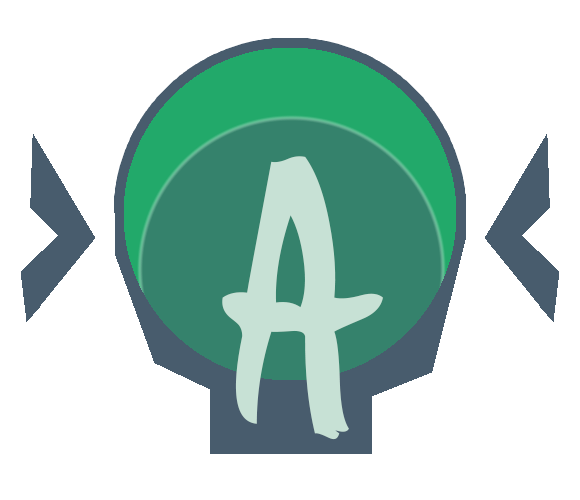
<style>
.page{position:relative;width:580px;height:500px;background:#ffffff}
.page>*{position:absolute;margin:0}
.t1{font:420px "BadHandwriting7.2";color:#c7e1d5}
</style>
<div class="page">
<p class="t1" style="left:222px;top:156px;width:161px;height:284px">A</p>
</div>
